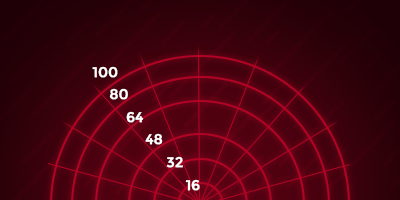
<style>
.page{position:relative;width:400px;height:200px}
.page>*{position:absolute;margin:0}
.t1{font:14px/22.6px "Montserrat-Regular";color:#ffffff;font-weight:bold}
</style>
<div class="page">
<p class="t1" style="left:92px;top:66px;width:108px;height:125px">100 <br>    80<br>        64<br>     48<br>          32<br>       16</p>
</div>
